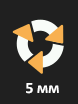
<style>
.page{position:relative;width:78px;height:104px;background:#202020}
.page>*{position:absolute;margin:0}
.t1{font:12px "Calibri-Bold";color:#ffffff}
</style>
<div class="page">
<p class="t1" style="left:26px;top:83px;width:33px;height:11px">5 мм</p>
</div>
